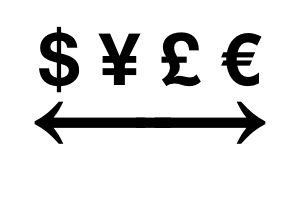
<style>
.page{position:relative;width:300px;height:200px;background:#ffffff}
.page>*{position:absolute;margin:0}
.t1{font:72px "HelveticaNeue-Bold";color:#000000}
.t2{font:120px "Impact";color:#000000}
</style>
<div class="page">
<p class="t1" style="left:39px;top:26px;width:223px;height:67px">$ ¥ £ €</p>
<p class="t2" style="left:34px;top:101px;width:232px;height:43px">←→</p>
</div>
